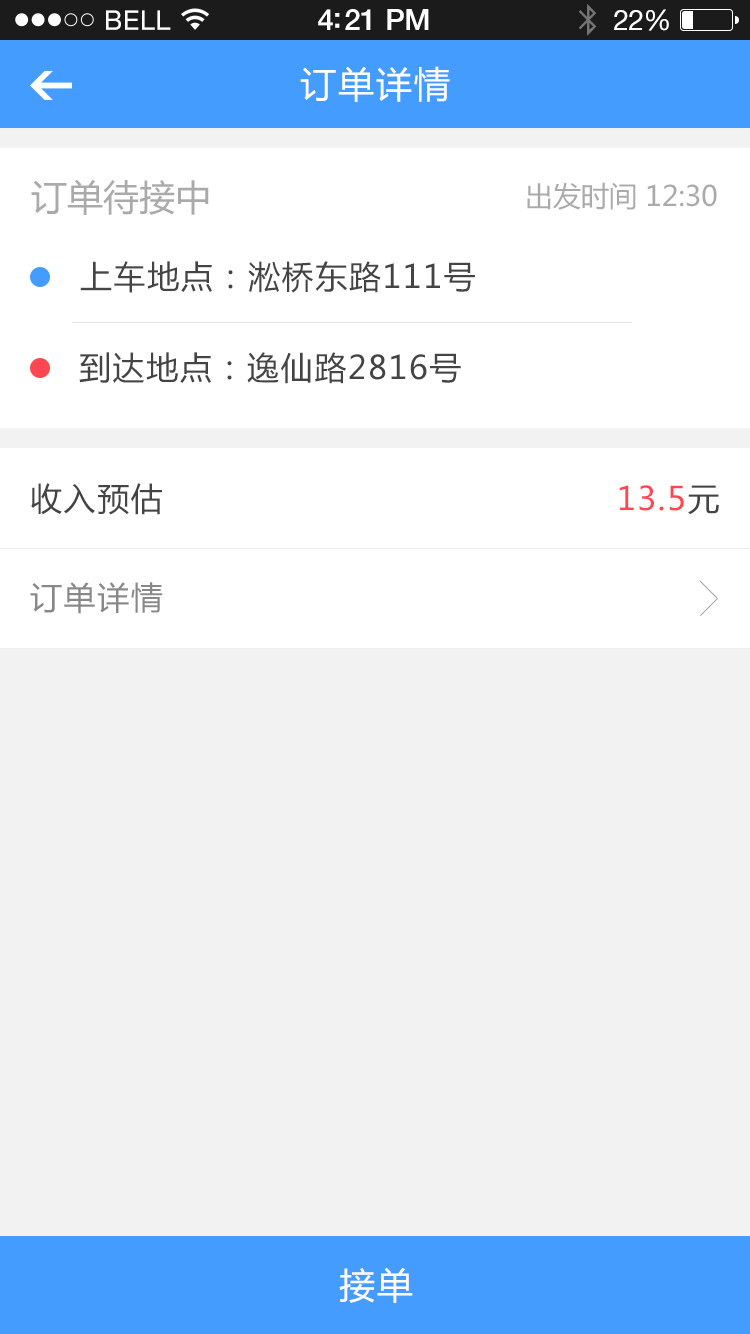
<style>
.page{position:relative;width:750px;height:1334px;background:#f2f2f2}
.page>*{position:absolute;margin:0}
.t1{font:36px "MicrosoftYaHei";letter-spacing:0.05em;color:#ffffff}
.t2{font:36px "MicrosoftYaHei";color:#aaaaaa}
.t3{font:28px "MicrosoftYaHei";color:#aaaaaa}
.t4{font:32px "MicrosoftYaHei";letter-spacing:0.05em;color:#444444}
.t5{font:32px "MicrosoftYaHei";letter-spacing:0.05em;color:#fe4750}
.t6{font:32px "MicrosoftYaHei";letter-spacing:0.05em;color:#888888}
</style>
<div class="page">
<p class="t1" style="left:300px;top:66px;width:150px;height:36px">订单详情</p>
<p class="t2" style="left:31px;top:179px;width:178px;height:36px">订单待接中</p>
<p class="t3" style="left:527px;top:182px;width:190px;height:28px">出发时间 12:30</p>
<p class="t4" style="left:80px;top:261px;width:395px;height:32px">上车地点：淞桥东路111号</p>
<p class="t4" style="left:79px;top:352px;width:382px;height:32px">到达地点：逸仙路2816号</p>
<p class="t4" style="left:31px;top:483px;width:131px;height:32px">收入预估</p>
<p class="t5" style="left:619px;top:485px;width:100px;height:30px">13.5<span class="t4">元</span></p>
<p class="t6" style="left:30px;top:582px;width:133px;height:32px">订单详情</p>
<p class="t1" style="left:339px;top:1267px;width:74px;height:36px">接单</p>
</div>
